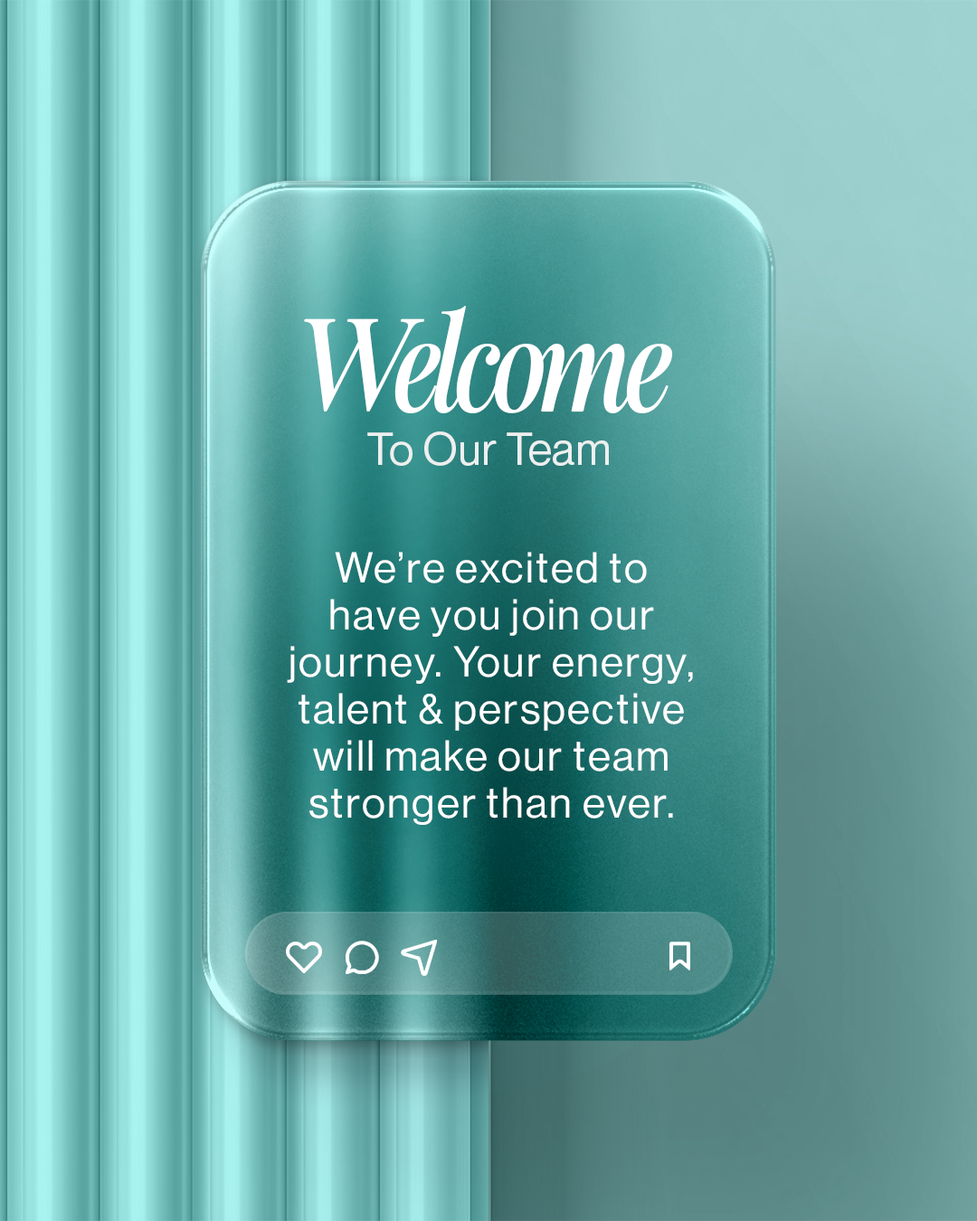
<style>
.page{position:relative;width:977px;height:1221px}
.page>*{position:absolute;margin:0}
.t1{font:131.8px "HVFitzgerald-BoldItalic";letter-spacing:-0.075em;color:#ffffff}
.t2{font:44.9px "NeueMontreal-Regular";color:#edefef}
.t3{font:42.2px/47px "NeueHaasDisplay-Roman";letter-spacing:0.05em;color:#ffffff}
</style>
<div class="page">
<p class="t1" style="left:304px;top:306px;width:369px;height:107px">Welcome</p>
<p class="t2" style="left:367px;top:431px;width:242px;height:35px">To Our Team</p>
<p class="t3" style="left:287px;top:552px;width:406px;height:273px;text-align:center">We’re excited to<br>have you join our<br>journey. Your energy,<br>talent &amp; perspective<br>will make our team<br>stronger than ever.</p>
</div>
